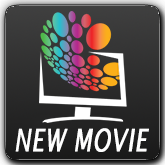
<style>
.page{position:relative;width:165px;height:165px}
.page>*{position:absolute;margin:0}
.t1{font:30.8px "LucidaSans-Italic";letter-spacing:0.025em;color:#ffffff;font-weight:bold;scale:0.71 1}
</style>
<div class="page">
<p class="t1" style="left:15px;top:128px;width:134px;height:24px">NEW MOVIE</p>
</div>
